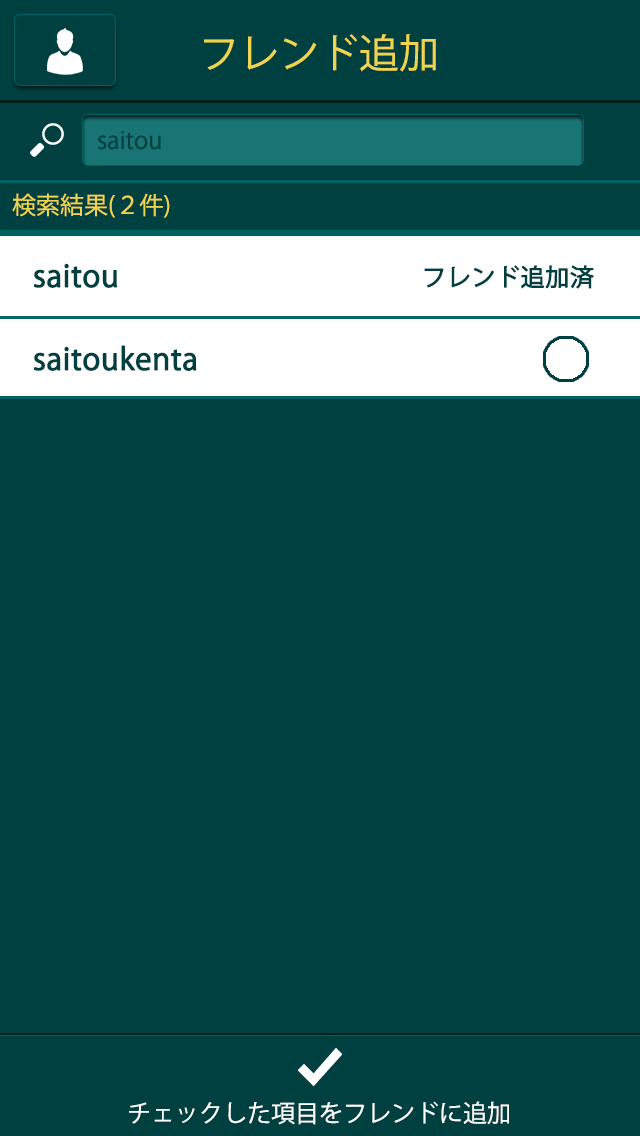
<style>
.page{position:relative;width:640px;height:1136px;background:#004040}
.page>*{position:absolute;margin:0}
.t1{font:40px "KozGoPr6N-Regular";color:#f0d351}
.t2{font:24px "KozGoPr6N-Regular";color:#004040}
.t3{font:24px "KozGoPr6N-Regular";color:#f0d351}
.t4{font:30px "KozGoPr6N-Regular";color:#004040;font-weight:bold}
.t5{font:24px "KozGoPr6N-Regular";color:#004040;font-weight:bold}
.t6{font:24px "KozGoPr6N-Regular";color:#ffffff}
</style>
<div class="page">
<p class="t1" style="left:204px;top:34px;width:232px;height:38px">フレンド追加</p>
<p class="t2" style="left:98px;top:130px;width:63px;height:20px">saitou</p>
<p class="t3" style="left:12px;top:193px;width:158px;height:25px">検索結果(２件)</p>
<p class="t4" style="left:33px;top:263px;width:84px;height:25px">saitou</p>
<p class="t5" style="left:424px;top:265px;width:170px;height:24px">フレンド追加済</p>
<p class="t4" style="left:33px;top:345px;width:164px;height:26px">saitoukenta</p>
<p class="t6" style="left:129px;top:1101px;width:380px;height:24px">チェックした項目をフレンドに追加</p>
</div>
